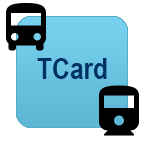
<style>
.page{position:relative;width:144px;height:144px;background:#ffffff}
.page>*{position:absolute;margin:0}
.t1{font:30px "ArialNarrow-Bold";color:#003365}
</style>
<div class="page">
<p class="t1" style="left:37px;top:58px;width:70px;height:21px">TCard</p>
</div>
